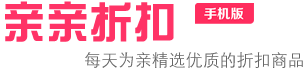
<style>
.page{position:relative;width:305px;height:70px;background:#ffffff}
.page>*{position:absolute;margin:0}
.t1{font:44px "DFZongYi-Bd-80-Win-GB";color:#ff3366}
.t2{font:17.2px "STXihei";color:#666666}
</style>
<div class="page">
<p class="t1" style="left:5px;top:1px;width:169px;height:41px">亲亲折扣</p>
<p class="t2" style="left:85px;top:52px;width:218px;height:16px">每天为亲精选优质的折扣商品</p>
</div>
